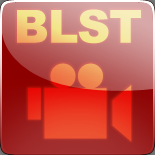
<style>
.page{position:relative;width:155px;height:155px}
.page>*{position:absolute;margin:0}
.t1{font:45.7px "Arial-Black";letter-spacing:-0.025em}
.t2{font:126.4px "SoftwareKit7"}
</style>
<div class="page">
<p class="t1" style="left:17px;top:9px;width:124px;height:35px">BLST</p>
<p class="t2" style="left:28px;top:63px;width:104px;height:79px">V</p>
</div>
